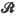
<style>
.page{position:relative;width:16px;height:16px;background:#ffffff}
.page>*{position:absolute;margin:0}
.t1{font:15px "BallparkWeiner";color:#363636}
</style>
<div class="page">
<p class="t1" style="left:0px;top:1px;width:15px;height:13px">R</p>
</div>
